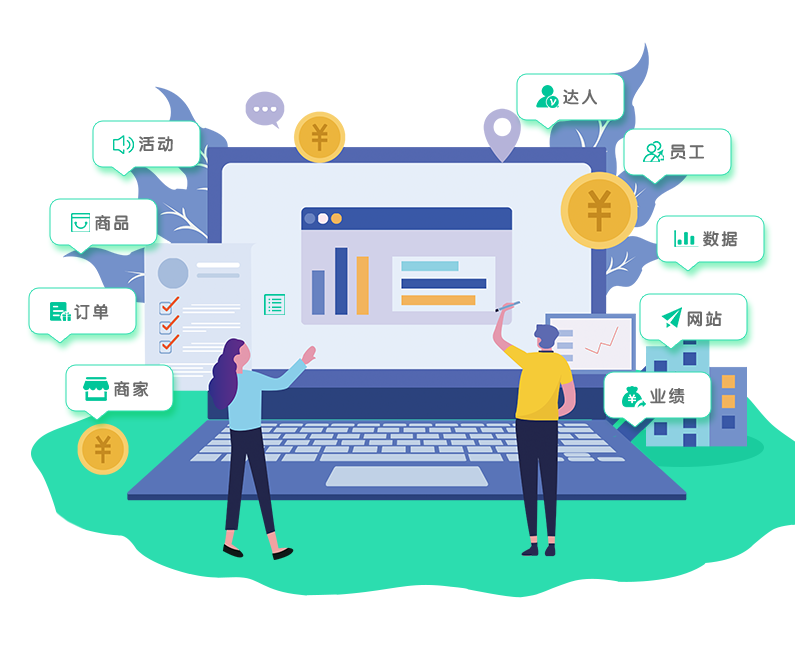
<style>
.page{position:relative;width:795px;height:656px;background:#ffffff}
.page>*{position:absolute;margin:0}
.t1{font:16.8px "FZY4K--GBK1-0";letter-spacing:0.12em;color:#6a6a6a;text-transform:uppercase}
</style>
<div class="page">
<p class="t1" style="left:563px;top:89px;width:34px;height:16px">达人</p>
<p class="t1" style="left:139px;top:136px;width:34px;height:16px">活动</p>
<p class="t1" style="left:670px;top:144px;width:34px;height:16px">员工</p>
<p class="t1" style="left:95px;top:215px;width:34px;height:16px">商品</p>
<p class="t1" style="left:703px;top:231px;width:35px;height:16px">数据</p>
<p class="t1" style="left:74px;top:304px;width:35px;height:16px">订单</p>
<p class="t1" style="left:687px;top:311px;width:35px;height:16px">网站</p>
<p class="t1" style="left:114px;top:381px;width:35px;height:16px">商家</p>
<p class="t1" style="left:650px;top:388px;width:35px;height:16px">业绩</p>
</div>
